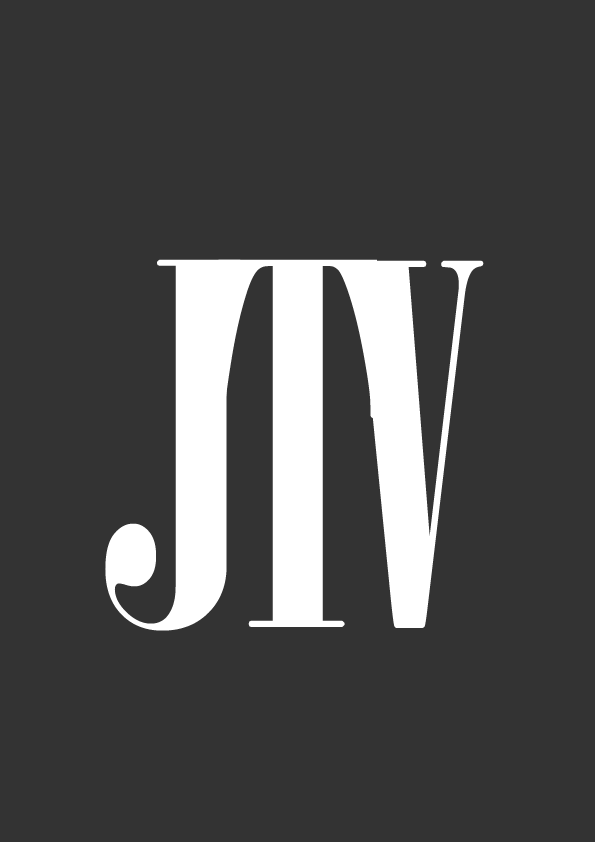
<style>
.page{position:relative;width:595px;height:842px;background:#333333}
.page>*{position:absolute;margin:0}
.t1{font:500px "Onyx";color:#ffffff}
</style>
<div class="page">
<p class="t1" style="left:105px;top:259px;width:138px;height:372px">J</p>
<p class="t1" style="left:218px;top:259px;width:159px;height:368px">T</p>
<p class="t1" style="left:342px;top:260px;width:142px;height:368px">V</p>
</div>
